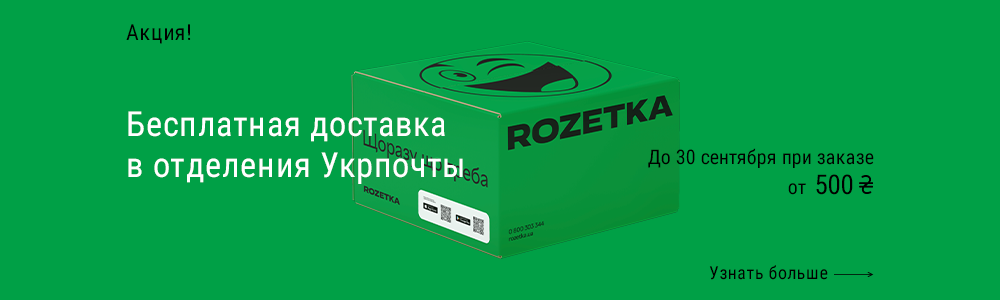
<style>
.page{position:relative;width:1000px;height:300px;background:#00a046}
.page>*{position:absolute;margin:0}
.t1{font:22px "RobotoCondensed-Regular";letter-spacing:0.02em;color:#000000}
.t2{font:34.4px "RobotoCondensed-Regular";letter-spacing:0.02em;color:#ffffff}
.t3{font:20px "RobotoCondensed-Regular";color:#000000}
.t4{font:27px "RobotoCondensed-Regular";color:#000000}
.t5{font:18px "RobotoCondensed-Regular";letter-spacing:0.02em;color:#000000}
</style>
<div class="page">
<p class="t1" style="left:126px;top:24px;width:65px;height:20px">Акция!</p>
<p class="t2" style="left:128px;top:111px;width:335px;height:73px">Бесплатная доставка в отделения Укрпочты</p>
<p class="t3" style="left:648px;top:148px;width:226px;height:20px">До 30 сентября при заказе</p>
<p class="t4" style="left:816px;top:174px;width:37px;height:21px">500</p>
<p class="t3" style="left:788px;top:183px;width:18px;height:12px">от</p>
<p class="t5" style="left:709px;top:265px;width:119px;height:15px">Узнать больше</p>
</div>
